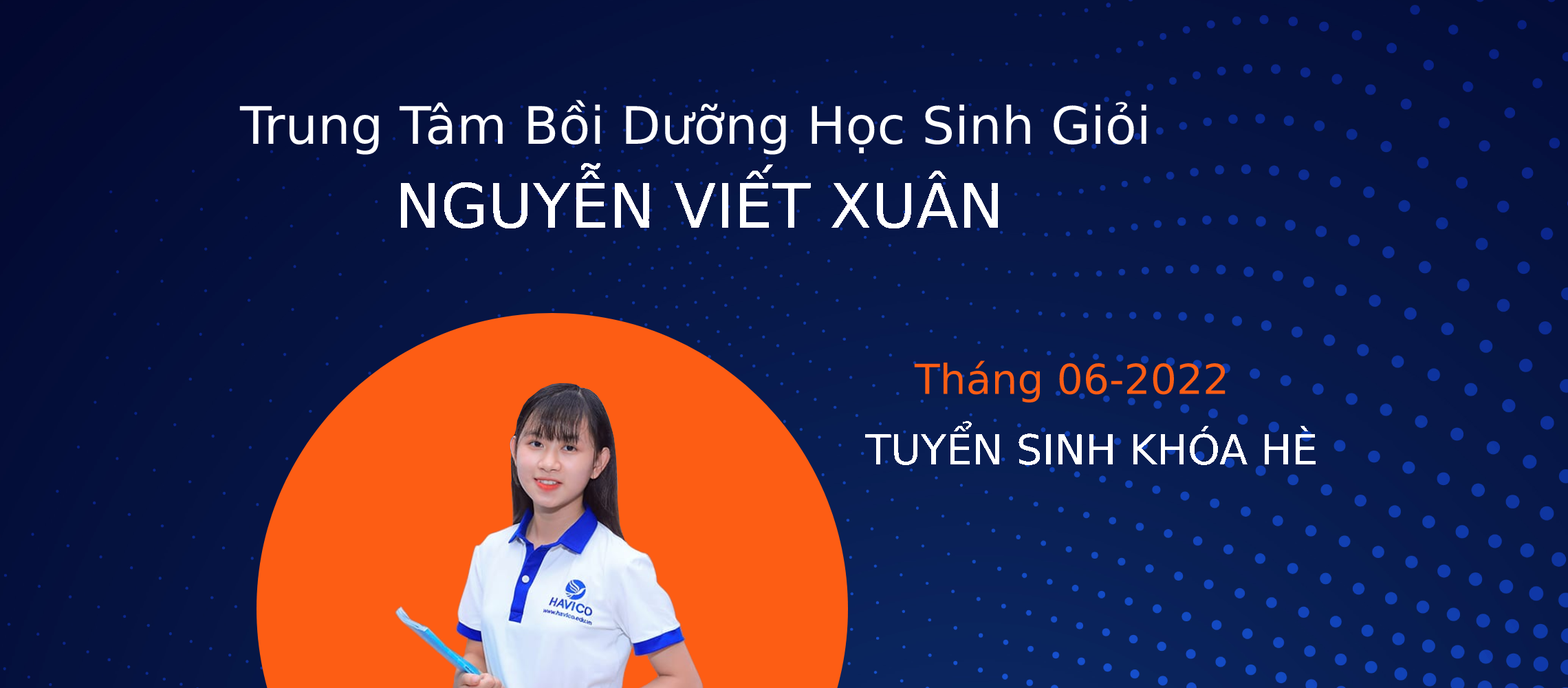
<style>
.page{position:relative;width:1568px;height:688px}
.page>*{position:absolute;margin:0}
.t1{font:51.6px "UTM HelvetIns";color:#ffffff}
.t2{font:61.2px "UTM HelvetIns";color:#ffffff}
.t3{font:41.3px "UTM HelvetIns";color:#fd5d14}
.t4{font:41.3px "UTM HelvetIns";color:#ffffff}
</style>
<div class="page">
<p class="t1" style="left:239px;top:100px;width:907px;height:55px">Trung Tâm Bồi Dưỡng Học Sinh Giỏi</p>
<p class="t2" style="left:400px;top:162px;width:599px;height:67px">NGUYỄN VIẾT XUÂN</p>
<p class="t3" style="left:914px;top:360px;width:312px;height:43px">Tháng 06-2022</p>
<p class="t4" style="left:865px;top:421px;width:451px;height:44px">TUYỂN SINH KHÓA HÈ</p>
</div>
